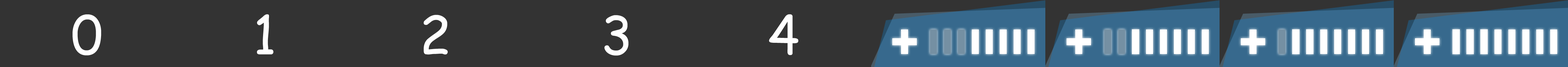
<style>
.page{position:relative;width:1568px;height:67px;background:#333333}
.page>*{position:absolute;margin:0}
.t1{font:52.3px "ComicSansMS";color:#ffffff}
</style>
<div class="page">
<p class="t1" style="left:72px;top:14px;width:29px;height:41px">0</p>
<p class="t1" style="left:257px;top:14px;width:17px;height:40px">1</p>
<p class="t1" style="left:423px;top:15px;width:25px;height:39px">2</p>
<p class="t1" style="left:604px;top:15px;width:25px;height:40px">3</p>
<p class="t1" style="left:769px;top:14px;width:29px;height:41px">4</p>
</div>
